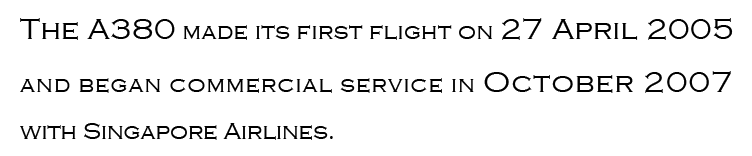
<style>
.page{position:relative;width:752px;height:156px;background:#ffffff}
.page>*{position:absolute;margin:0}
.t1{font:24px "CopperplateGothic-Light";color:#000000}
.t2{font:30px "CopperplateGothic-Light";color:#000000}
</style>
<div class="page">
<p class="t1" style="left:20px;top:18px;width:713px;height:122px;text-align:justify"><span class="t2">The A380</span> made its first flight on <span class="t2">27 April 2005</span> and began commercial service in <span class="t2">October 2007</span> with Singapore Airlines.</p>
</div>
